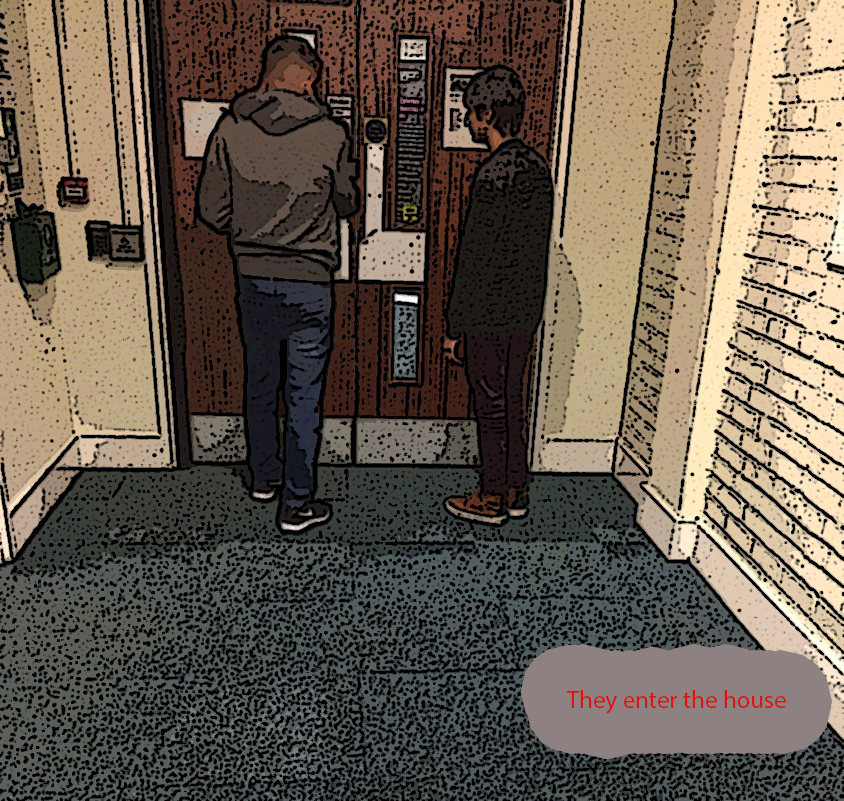
<style>
.page{position:relative;width:844px;height:801px}
.page>*{position:absolute;margin:0}
.t1{font:12px "MyriadPro-Regular";color:#da1515}
</style>
<div class="page">
<p class="t1" style="left:566px;top:690px;width:220px;height:24px">They enter the house</p>
</div>
